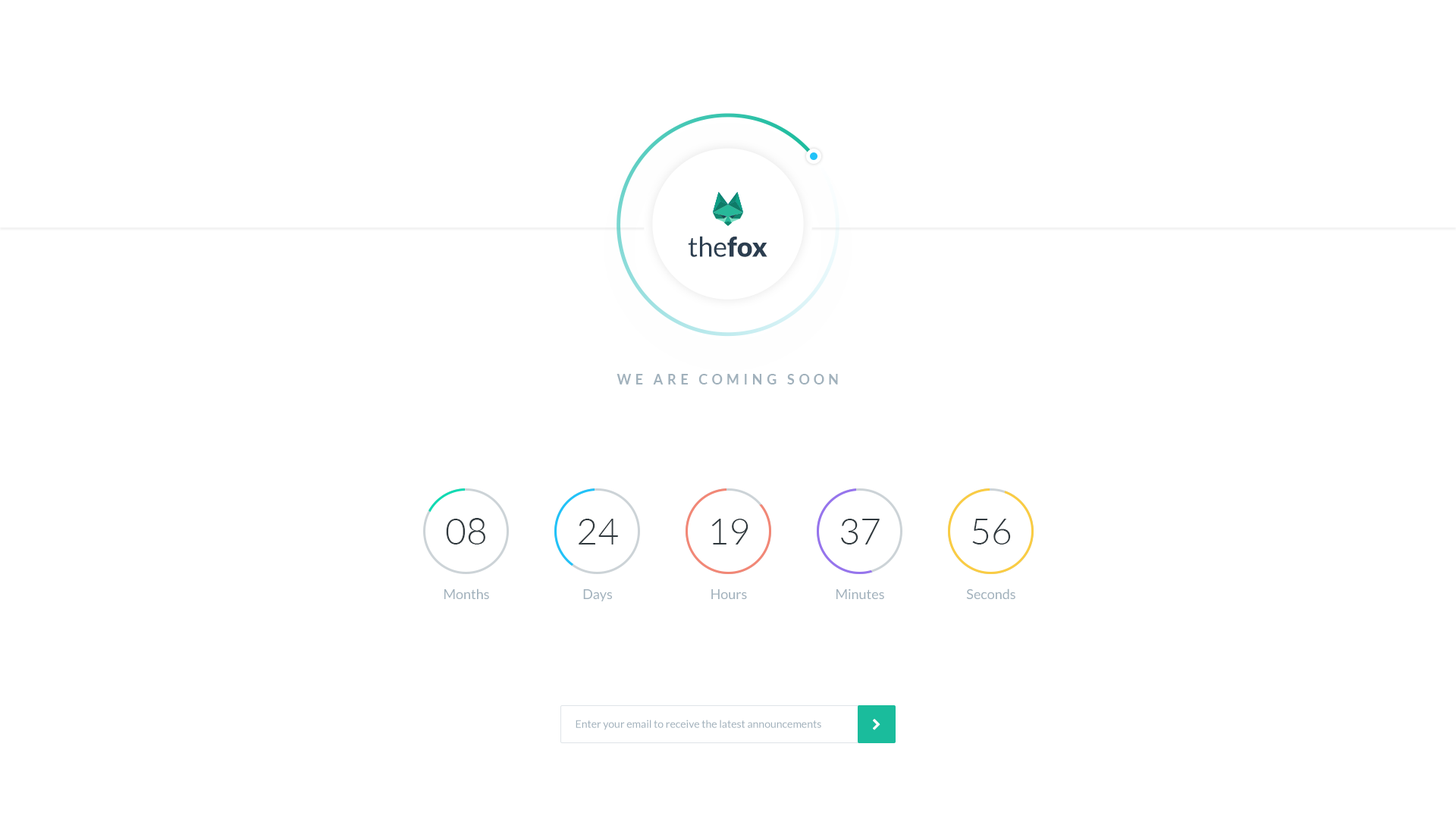
<style>
.page{position:relative;width:1456px;height:819px;background:#ffffff}
.page>*{position:absolute;margin:0}
.t1{font:27.3px "Lato-Regular";color:#2c3e50}
.t2{font:27.3px "Lato-Black";color:#2c3e50}
.t3{font:13.6px "Lato-Bold";letter-spacing:0.3em;color:#a1b1bc}
.t4{font:36.4px "Lato-Light";color:#2f383d}
.t5{font:13.6px "Lato-Regular";color:#a1b1bc}
.t6{font:10.6px "Lato-Regular";color:#a1b1bc}
</style>
<div class="page">
<p class="t1" style="left:688px;top:236px;width:79px;height:21px">the<span class="t2">fox</span></p>
<p class="t3" style="left:617px;top:374px;width:221px;height:10px">WE ARE COMING SOON</p>
<p class="t4" style="left:446px;top:518px;width:39px;height:26px">08</p>
<p class="t4" style="left:579px;top:519px;width:39px;height:25px">24</p>
<p class="t4" style="left:711px;top:519px;width:37px;height:25px">19</p>
<p class="t4" style="left:841px;top:519px;width:39px;height:25px">37</p>
<p class="t4" style="left:972px;top:519px;width:39px;height:25px">56</p>
<p class="t5" style="left:444px;top:588px;width:45px;height:11px">Months</p>
<p class="t5" style="left:583px;top:589px;width:29px;height:12px">Days</p>
<p class="t5" style="left:711px;top:589px;width:36px;height:10px">Hours</p>
<p class="t5" style="left:836px;top:588px;width:48px;height:11px">Minutes</p>
<p class="t5" style="left:966px;top:588px;width:49px;height:11px">Seconds</p>
<p class="t6" style="left:576px;top:720px;width:245px;height:10px">Enter your email to receive the latest announcements</p>
</div>
